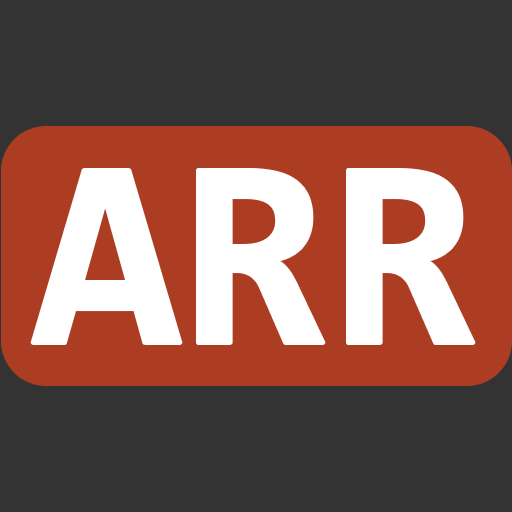
<style>
.page{position:relative;width:512px;height:512px;background:#333333}
.page>*{position:absolute;margin:0}
.t1{font:271px "Consolas-Bold";color:#ffffff}
</style>
<div class="page">
<p class="t1" style="left:32px;top:170px;width:442px;height:173px">ARR</p>
</div>
